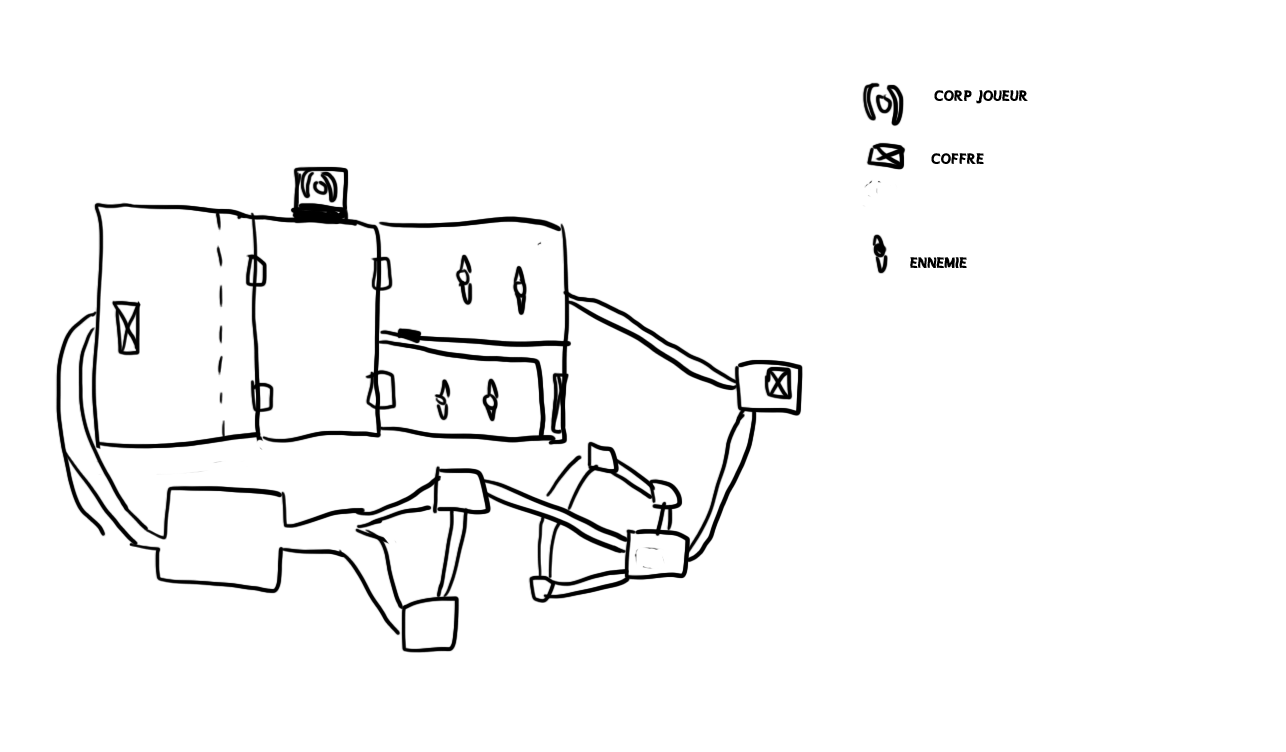
<style>
.page{position:relative;width:1286px;height:752px;background:#ffffff}
.page>*{position:absolute;margin:0}
.t1{font:15.4px "MANOLETE";color:#000000}
</style>
<div class="page">
<p class="t1" style="left:934px;top:90px;width:94px;height:14px">corp joueur</p>
<p class="t1" style="left:931px;top:153px;width:53px;height:11px">coffre</p>
<p class="t1" style="left:910px;top:257px;width:57px;height:11px">ennemie</p>
</div>
